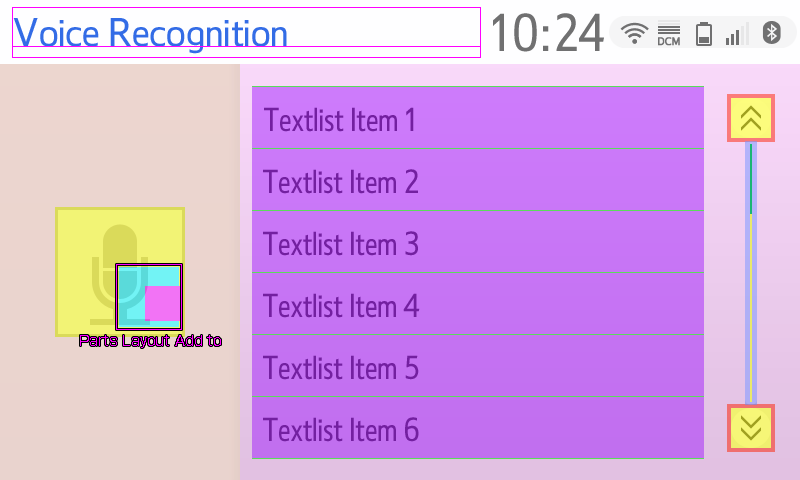
<style>
.page{position:relative;width:800px;height:480px}
.page>*{position:absolute;margin:0}
.t1{font:48px "Tfont1502_T2S";letter-spacing:0.05em;color:#707071}
.t2{font:36px "Tfont1502_T1S";color:#336ce6}
.t3{font:30px "Tfont1502_T2S";color:#7320a0}
.t4{font:14px "ShinGoPro-Regular";color:#ff00ff}
</style>
<div class="page">
<p class="t1" style="left:493px;top:13px;width:111px;height:39px">10:24</p>
<p class="t2" style="left:13px;top:18px;width:274px;height:36px">Voice Recognition</p>
<p class="t3" style="left:264px;top:107px;width:150px;height:25px">Textlist Item 1</p>
<p class="t3" style="left:263px;top:169px;width:155px;height:25px">Textlist Item 2</p>
<p class="t3" style="left:263px;top:231px;width:155px;height:25px">Textlist Item 3</p>
<p class="t3" style="left:263px;top:293px;width:157px;height:25px">Textlist Item 4</p>
<p class="t4" style="left:80px;top:335px;width:141px;height:13px">Parts Layout Add to</p>
<p class="t3" style="left:263px;top:355px;width:156px;height:25px">Textlist Item 5</p>
<p class="t3" style="left:263px;top:417px;width:156px;height:25px">Textlist Item 6</p>
</div>
